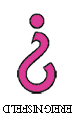
<style>
.page{position:relative;width:76px;height:124px;background:#ffffff}
.page>*{position:absolute;margin:0}
.t1{font:12px "AdobeDevanagari-Regular";color:#000000;scale:0.9 1}
</style>
<div class="page">
<p class="t1" style="left:3px;top:105px;width:69px;height:8px;rotate:180deg">EREIGNISFELD</p>
</div>
